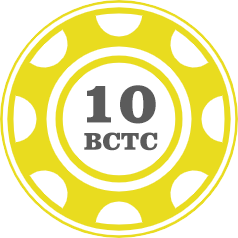
<style>
.page{position:relative;width:238px;height:238px;background:#ffffff}
.page>*{position:absolute;margin:0}
.t1{font:60px "ClarendonBT-Black";color:#5b5b5b}
.t2{font:25px "ClarendonBT-Black";color:#5b5b5b}
</style>
<div class="page">
<p class="t1" style="left:87px;top:85px;width:69px;height:39px">10</p>
<p class="t2" style="left:84px;top:132px;width:74px;height:19px">BCTC</p>
</div>
